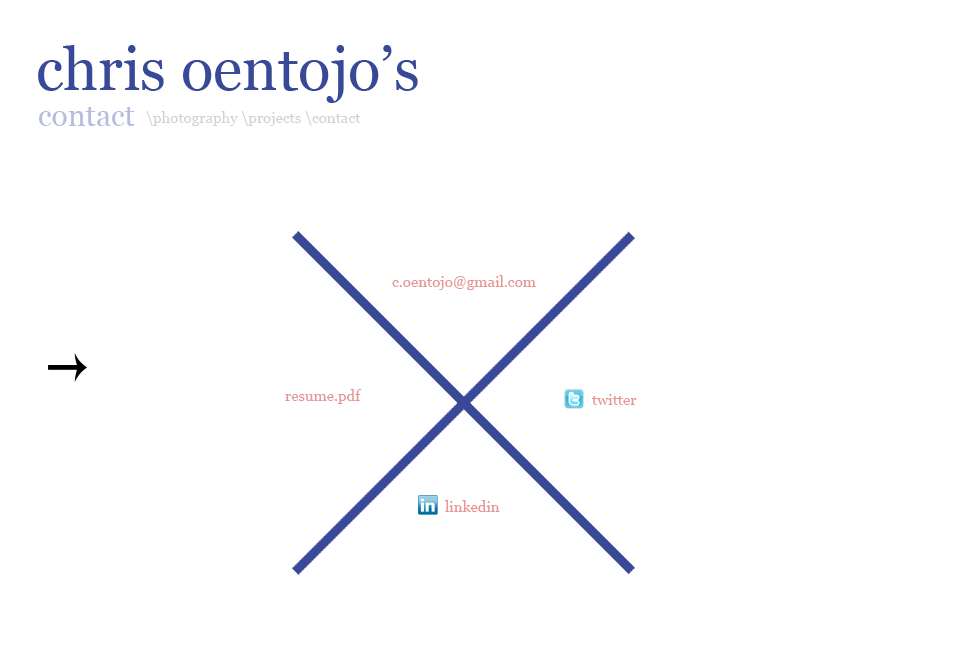
<style>
.page{position:relative;width:960px;height:650px;background:#ffffff}
.page>*{position:absolute;margin:0}
.t1{font:60px "Georgia";color:#384a97}
.t2{font:30px "Georgia";color:#b6bcdf}
.t3{font:15px "Georgia";color:#d2d2d2}
.t4{font:15px "Georgia";color:#e69494}
</style>
<div class="page">
<p class="t1" style="left:38px;top:45px;width:380px;height:58px">chris oentojo’s</p>
<p class="t2" style="left:39px;top:107px;width:96px;height:19px">contact</p>
<p class="t3" style="left:146px;top:111px;width:215px;height:15px">\photography \projects \contact</p>
<p class="t4" style="left:392px;top:275px;width:144px;height:15px">c.oentojo@gmail.com</p>
<p class="t4" style="left:285px;top:389px;width:77px;height:15px">resume.pdf</p>
<p class="t4" style="left:591px;top:394px;width:46px;height:11px">twitter</p>
<p class="t4" style="left:444px;top:500px;width:56px;height:12px">linkedin</p>
</div>
